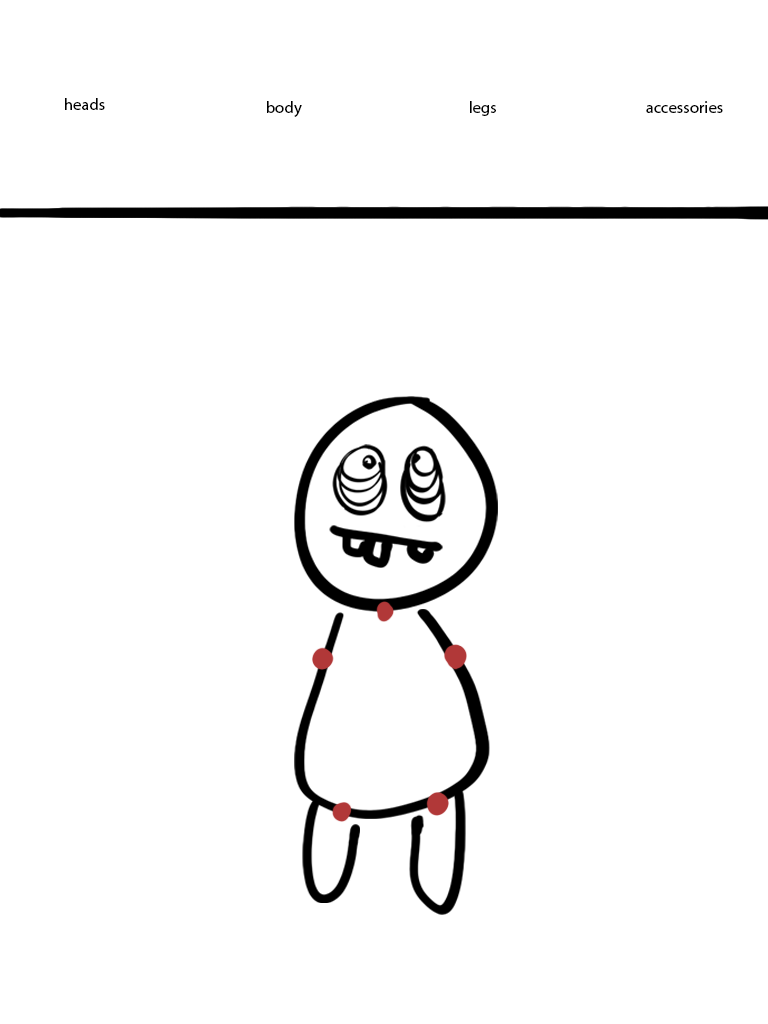
<style>
.page{position:relative;width:768px;height:1024px;background:#ffffff}
.page>*{position:absolute;margin:0}
.t1{font:12px "MyriadPro-Regular";color:#000000}
</style>
<div class="page">
<p class="t1" style="left:65px;top:98px;width:40px;height:12px">heads</p>
<p class="t1" style="left:267px;top:101px;width:35px;height:16px">body</p>
<p class="t1" style="left:470px;top:101px;width:26px;height:15px">legs</p>
<p class="t1" style="left:646px;top:101px;width:77px;height:12px">accessories</p>
</div>
